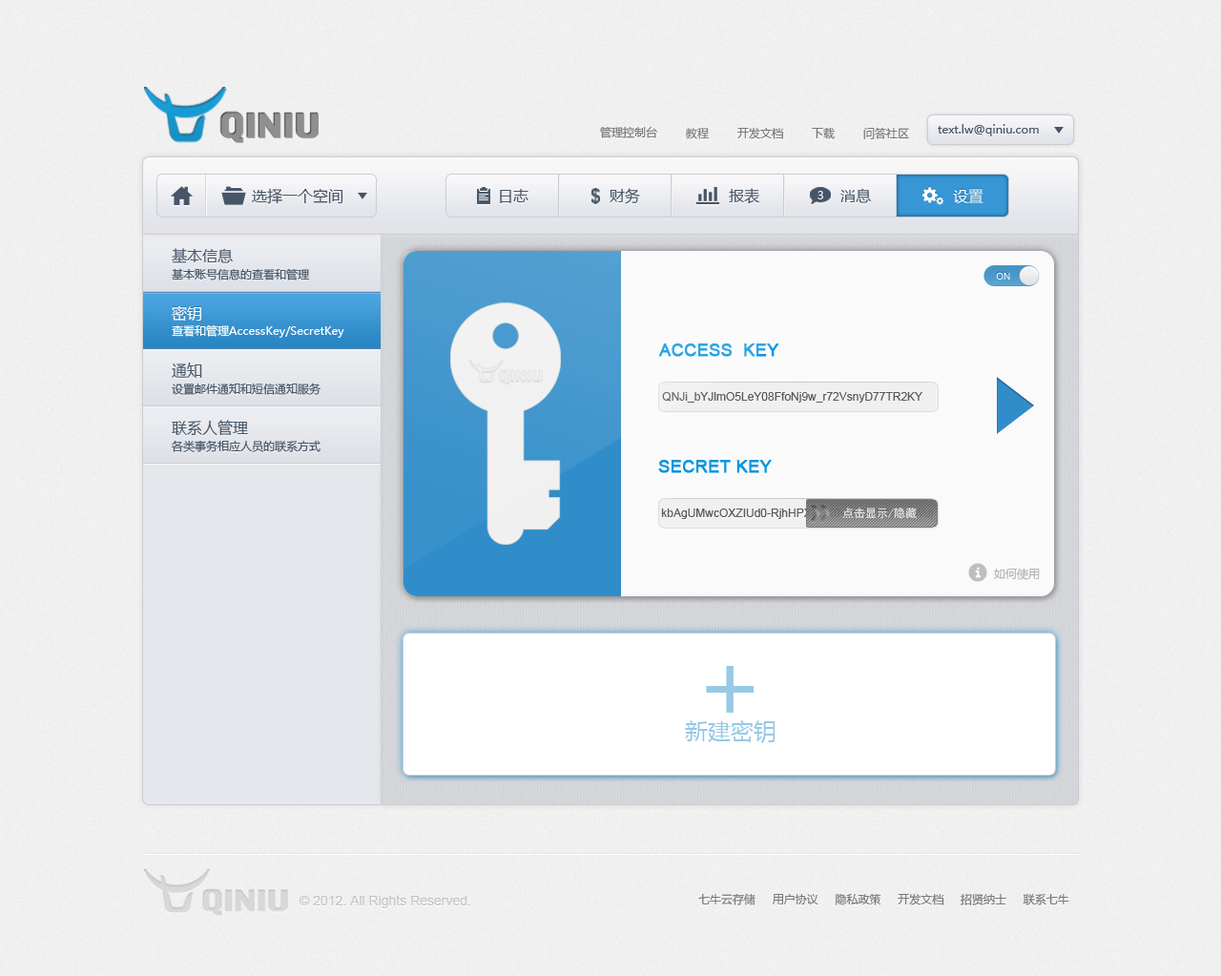
<style>
.page{position:relative;width:1221px;height:976px}
.page>*{position:absolute;margin:0}
.t1{font:11.5px "MicrosoftYaHei";color:#787878}
.t2{font:11.5px "MicrosoftYaHei";color:#465567}
.t3{font:15.3px "MicrosoftYaHei";color:#465567}
.t4{font:11.5px "MicrosoftYaHei";color:#f8f8f9}
.t5{font:15.3px "MicrosoftYaHei";color:#ffffff}
.t6{font:9.5px "ArialMT";letter-spacing:0.01em;color:#ffffff}
.t7{font:11.5px "MicrosoftYaHei";color:#ffffff}
.t8{font:11.5px "ArialMT"}
.t9{font:17.2px "ArialMT";font-weight:bold}
.t10{font:11.5px "ArialMT";color:#585858}
.t11{font:17.2px "ArialMT";color:#0c94de;font-weight:bold}
.t12{font:11.5px "SimHei";color:#e6e6e6}
.t13{font:11.5px "MicrosoftYaHei";color:#b4b4b4}
.t14{font:95.4px "MicrosoftYaHei";color:#97c9e5}
.t15{font:22.9px "MicrosoftYaHei";color:#97c9e5}
.t16{font:13.4px "ArialMT";color:#c6c6c6}
</style>
<div class="page">
<p class="t1" style="left:600px;top:126px;width:57px;height:12px">管理控制台</p>
<p class="t2" style="left:938px;top:124px;width:101px;height:12px">text.lw@qiniu.com</p>
<p class="t1" style="left:686px;top:128px;width:24px;height:11px">教程</p>
<p class="t1" style="left:738px;top:127px;width:45px;height:12px">开发文档</p>
<p class="t1" style="left:812px;top:127px;width:23px;height:12px">下载</p>
<p class="t1" style="left:864px;top:127px;width:45px;height:12px">问答社区</p>
<p class="t3" style="left:252px;top:188px;width:92px;height:16px">选择一个空间</p>
<p class="t3" style="left:500px;top:189px;width:29px;height:14px">日志</p>
<p class="t3" style="left:610px;top:188px;width:30px;height:16px">财务</p>
<p class="t3" style="left:729px;top:188px;width:31px;height:16px">报表</p>
<p class="t4" style="left:818px;top:191px;width:6px;height:8px">3</p>
<p class="t3" style="left:841px;top:188px;width:30px;height:15px">消息</p>
<p class="t5" style="left:953px;top:189px;width:31px;height:14px">设置</p>
<p class="t3" style="left:172px;top:248px;width:61px;height:15px">基本信息</p>
<p class="t2" style="left:172px;top:268px;width:138px;height:13px">基本账号信息的查看和管理</p>
<p class="t6" style="left:996px;top:272px;width:15px;height:8px">ON</p>
<p class="t5" style="left:172px;top:305px;width:29px;height:17px">密钥</p>
<p class="t7" style="left:172px;top:324px;width:172px;height:14px">查看和管理AccessKey/SecretKey</p>
<p class="t8" style="left:658px;top:344px;width:265px;height:59px"><span class="t9">ACCESS  KEY<br></span><br> QNJi_bYJlmO5LeY08FfoNj9w_r72VsnyD77TR2KY</p>
<p class="t3" style="left:172px;top:363px;width:30px;height:15px">通知</p>
<p class="t2" style="left:172px;top:383px;width:149px;height:12px">设置邮件通知和短信通知服务</p>
<p class="t3" style="left:172px;top:420px;width:76px;height:16px">联系人管理</p>
<p class="t2" style="left:172px;top:440px;width:149px;height:12px">各类事务相应人员的联系方式</p>
<p class="t10" style="left:658px;top:460px;width:275px;height:59px"><span class="t11">SECRET KEY<br></span><br> kbAgUMwcOXZIUd0-RjhHPXkOK0vamDxN1Hzi5Wuj</p>
<p class="t12" style="left:843px;top:508px;width:74px;height:11px">点击显示/隐藏</p>
<p class="t13" style="left:994px;top:568px;width:46px;height:12px">如何使用</p>
<p class="t14" style="left:706px;top:666px;width:49px;height:47px">+</p>
<p class="t15" style="left:685px;top:720px;width:91px;height:23px">新建密钥</p>
<p class="t1" style="left:699px;top:893px;width:371px;height:13px">七牛云存储     用户协议     隐私政策     开发文档     招贤纳士     联系七牛</p>
<p class="t16" style="left:299px;top:895px;width:171px;height:13px">© 2012. All Rights Reserved.</p>
</div>
